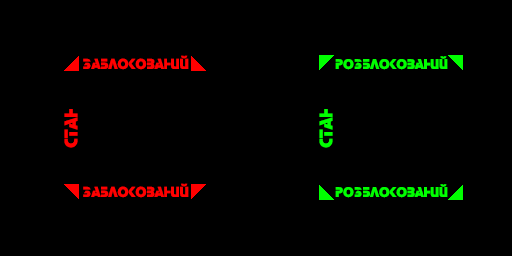
<style>
.page{position:relative;width:512px;height:256px;background:#000000}
.page>*{position:absolute;margin:0}
.t1{font:15px "Stop";color:#ff0000}
.t2{font:14.5px "Stop";color:#00ff00}
.t3{font:19.2px "Stop";color:#ff0000}
.t4{font:19.2px "Stop";color:#00ff00}
</style>
<div class="page">
<p class="t1" style="left:83px;top:55px;width:106px;height:15px">заблокований</p>
<p class="t2" style="left:335px;top:56px;width:113px;height:14px">розблокований</p>
<p class="t3" style="left:64px;top:109px;width:14px;height:39px;rotate:-90deg">стан</p>
<p class="t4" style="left:319px;top:109px;width:14px;height:39px;rotate:-90deg">стан</p>
<p class="t1" style="left:83px;top:183px;width:106px;height:15px">заблокований</p>
<p class="t2" style="left:335px;top:184px;width:113px;height:14px">розблокований</p>
</div>
